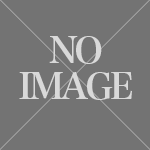
<style>
.page{position:relative;width:150px;height:150px;background:#737373}
.page>*{position:absolute;margin:0}
.t1{font:36px/36px "HiraMinProN-W6";letter-spacing:-0.1em;color:#d9d9d9}
</style>
<div class="page">
<p class="t1" style="left:19px;top:36px;width:113px;height:64px;text-align:center">NO<br>IMAGE</p>
</div>
